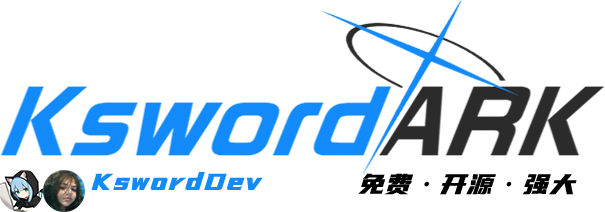
<style>
.page{position:relative;width:605px;height:212px;background:#ffffff}
.page>*{position:absolute;margin:0}
.t1{font:28.2px "YouSheBiaoTiHei";letter-spacing:0.025em;color:#128afa;font-style:italic}
.t2{font:28.2px "YouSheBiaoTiHei";letter-spacing:0.025em;color:#000000;font-style:italic}
</style>
<div class="page">
<p class="t1" style="left:91px;top:172px;width:172px;height:18px">KswordDev</p>
<p class="t2" style="left:358px;top:173px;width:219px;height:22px">免费·开源·强大</p>
</div>
